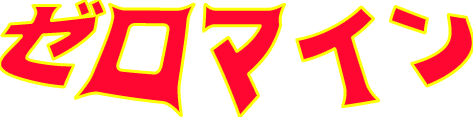
<style>
.page{position:relative;width:473px;height:117px;background:#ffffff}
.page>*{position:absolute;margin:0}
.t1{font:90px "AMEMUCHIGOTHIC-06";color:#ff022c}
</style>
<div class="page">
<p class="t1" style="left:0px;top:0px;width:474px;height:117px">ゼロマイン</p>
</div>
